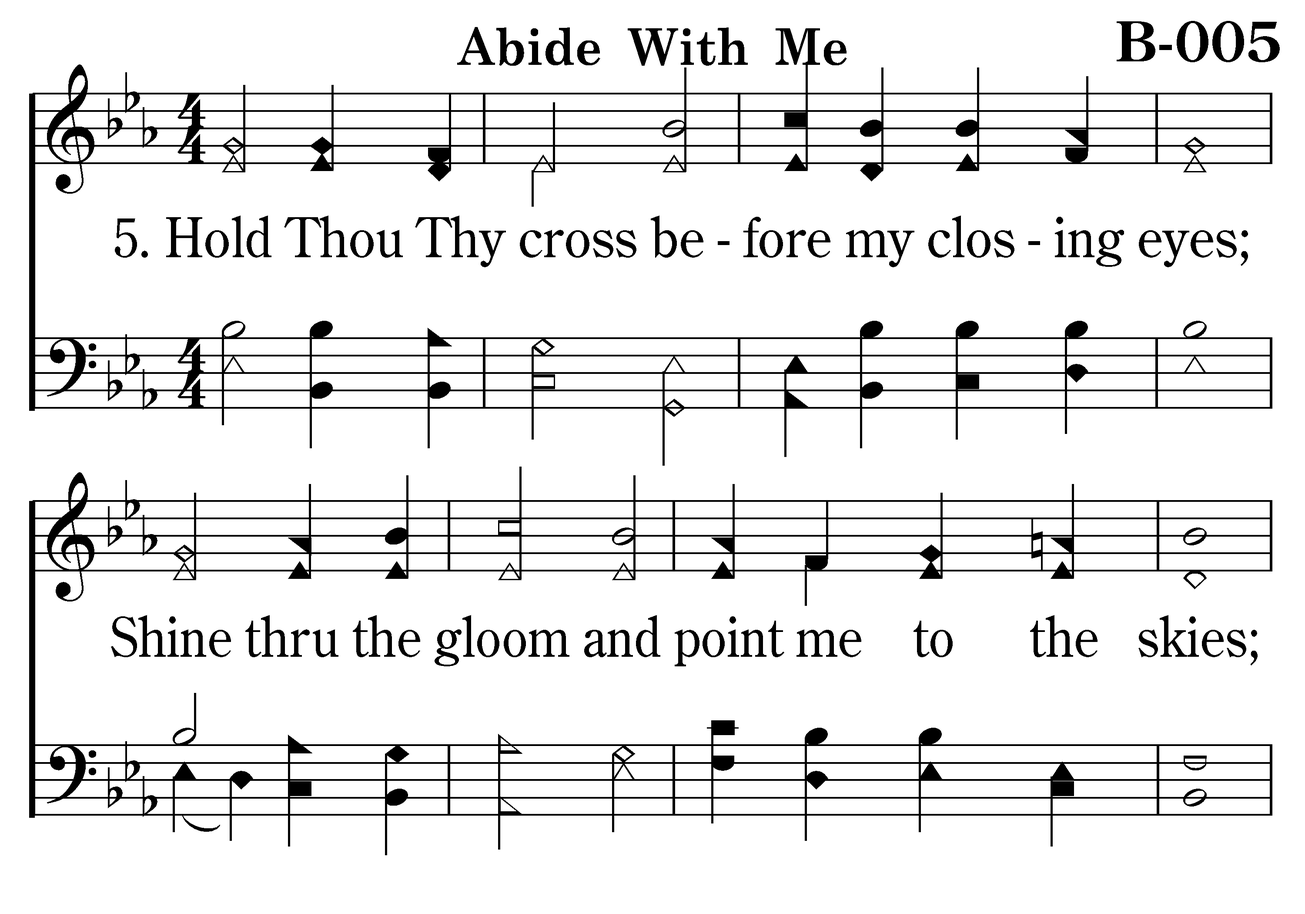
<style>
.page{position:relative;width:1305px;height:914px;background:#ffffff}
.page>*{position:absolute;margin:0}
.t1{font:54.4px "CenturyOldStyleStd-Bold";color:#000000}
.t2{font:54.4px "CenturyOldStyleStd-Regular";color:#000000;scale:0.95 1}
.t3{font:54.4px "CenturyOldStyleStd-Regular";color:#000000;scale:0.92 1}
</style>
<div class="page">
<p class="t1" style="left:1117px;top:21px;width:163px;height:41px">B-005</p>
<p class="t2" style="left:115px;top:215px;width:1133px;height:52px">5. Hold Thou Thy cross be - fore my clos - ing eyes;</p>
<p class="t3" style="left:111px;top:615px;width:1147px;height:51px">Shine thru the gloom and point me    to      the   skies;</p>
</div>
